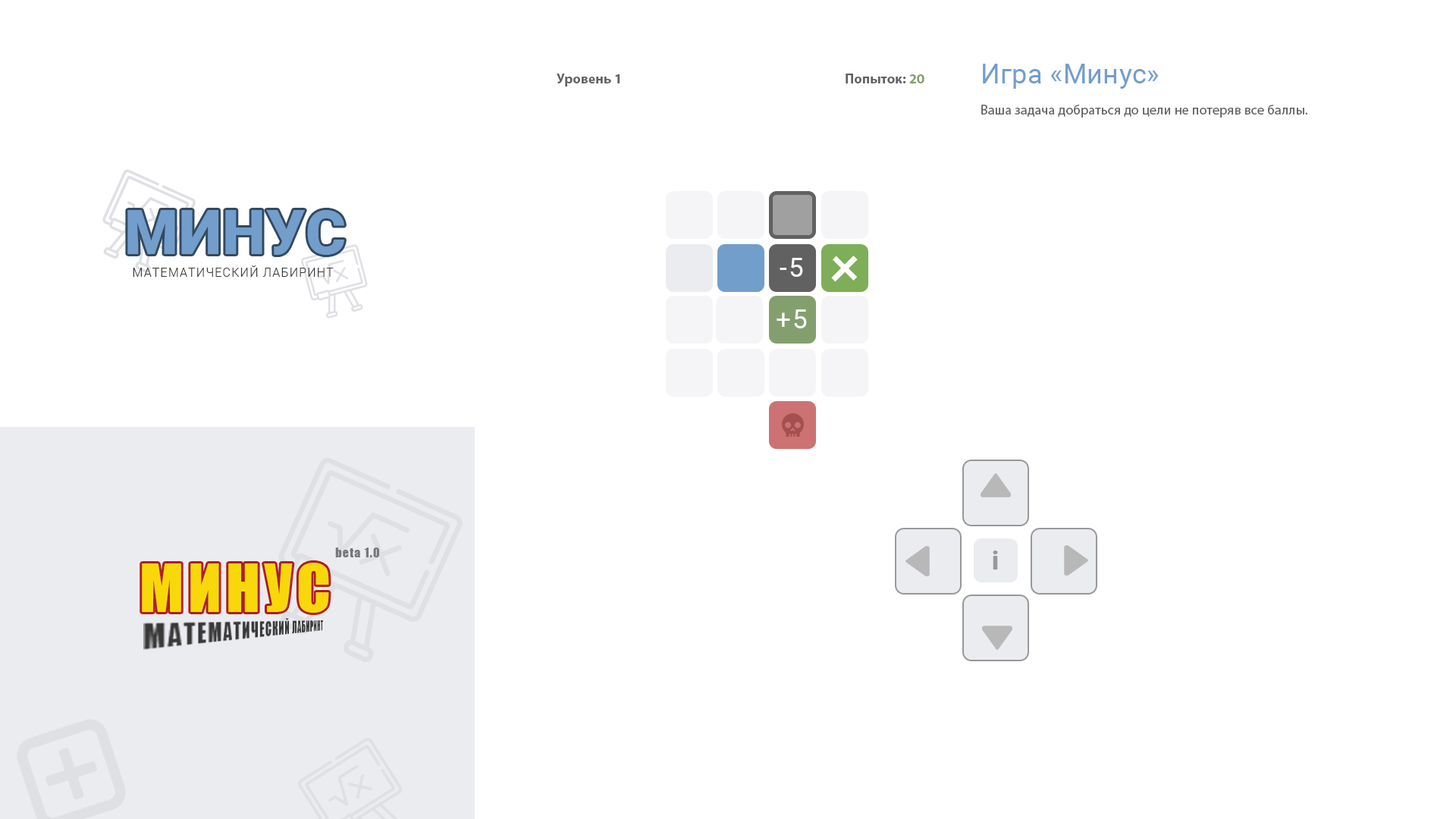
<style>
.page{position:relative;width:1456px;height:819px;background:#ffffff}
.page>*{position:absolute;margin:0}
.t1{font:13.6px/8.3px "MyriadPro-Regular";letter-spacing:0.01em;color:#616161}
.t2{font:27.3px/8.3px "Roboto-Regular";letter-spacing:0.01em;color:#729ecc}
.t3{font:13.6px "MyriadPro-Bold";letter-spacing:0.01em;color:#616161}
.t4{font:13.6px "MyriadPro-Bold";letter-spacing:0.01em;color:#849f6e}
.t5{font:61.5px "Roboto-Black";letter-spacing:0.01em;color:#729ecc}
.t6{font:26.5px "Roboto-Regular";letter-spacing:0.075em;color:#ffffff}
.t7{font:60.7px "Roboto-Regular";letter-spacing:0.075em;color:#ffffff}
.t8{font:12.1px "Roboto-Light";letter-spacing:0.075em;color:#383838}
.t9{font:12.1px "Impact";letter-spacing:0.075em;color:#777777}
.t10{font:25px "Roboto-Black";letter-spacing:0.075em;color:#989898}
.t11{font:61.5px "Impact";letter-spacing:0.075em;color:#f8d80b}
</style>
<div class="page">
<p class="t1" style="left:981px;top:64px;width:326px;height:54px"><span class="t2">Игра «Минус»<br></span>Ваша задача добраться до цели не потеряв все баллы.</p>
<p class="t3" style="left:846px;top:74px;width:78px;height:9px">Попыток: <span class="t4">20</span></p>
<p class="t5" style="left:127px;top:210px;width:217px;height:45px">МИНУС</p>
<p class="t6" style="left:780px;top:258px;width:23px;height:19px">-5</p>
<p class="t7" style="left:831px;top:256px;width:27px;height:26px;rotate:45deg">+</p>
<p class="t8" style="left:133px;top:265px;width:201px;height:12px">МАТЕМАТИЧЕСКИЙ ЛАБИРИНТ</p>
<p class="t6" style="left:777px;top:309px;width:30px;height:19px">+5</p>
<p class="t9" style="left:335px;top:548px;width:44px;height:9px">beta 1.0</p>
<p class="t10" style="left:993px;top:551px;width:5px;height:19px">i</p>
<p class="t11" style="left:142px;top:563px;width:187px;height:50px">МИНУС</p>
</div>
